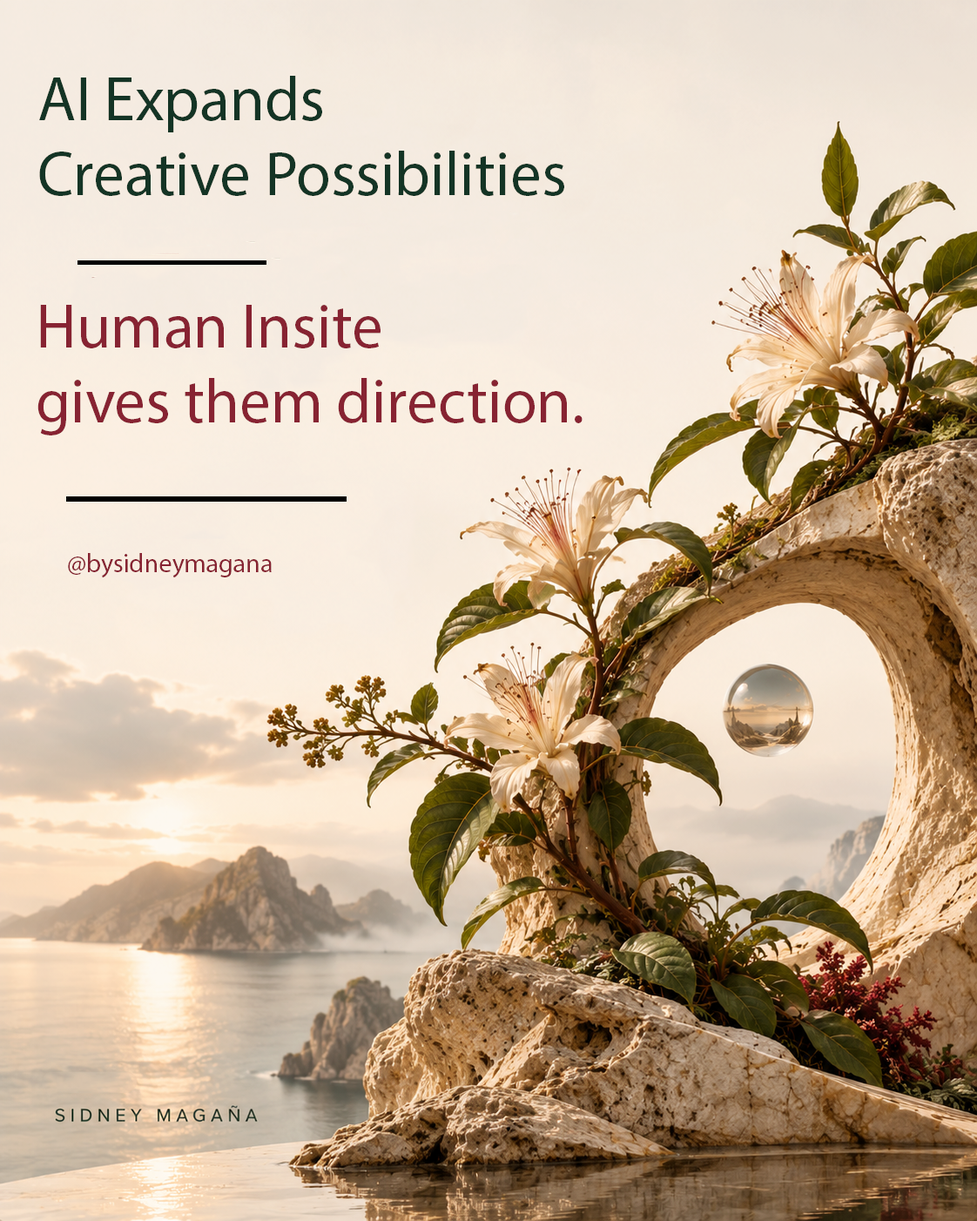
<style>
.page{position:relative;width:977px;height:1221px}
.page>*{position:absolute;margin:0}
.t1{font:62.7px "MyriadPro-Regular";color:#102b21}
.t2{font:62.7px "MyriadPro-Regular";color:#741d2d}
.t3{font:26.1px "MyriadPro-Regular";color:#741d2d}
</style>
<div class="page">
<p class="t1" style="left:39px;top:76px;width:525px;height:120px">AI Expands <br>Creative Possibilities</p>
<p class="t2" style="left:37px;top:305px;width:545px;height:130px">Human Insite <br>gives them direction.</p>
<p class="t3" style="left:68px;top:553px;width:204px;height:25px">@bysidneymagana</p>
</div>
